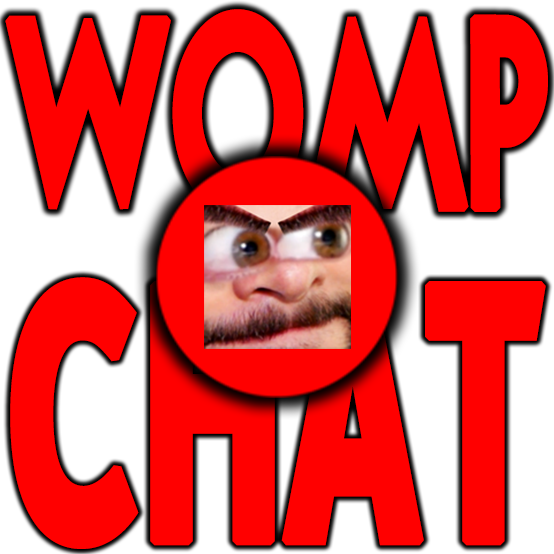
<style>
.page{position:relative;width:554px;height:554px;background:#ff0000}
.page>*{position:absolute;margin:0}
.t1{font:336px "NOVAegular";color:#ff0000;font-weight:bold;scale:0.61 1}
.t2{font:412.9px "YouTube-Sans-Bold";color:#ff0000;font-weight:bold;scale:0.58 1}
</style>
<div class="page">
<p class="t1" style="left:5px;top:9px;width:543px;height:209px">womp</p>
<p class="t2" style="left:10px;top:275px;width:536px;height:274px">CHAT</p>
</div>
